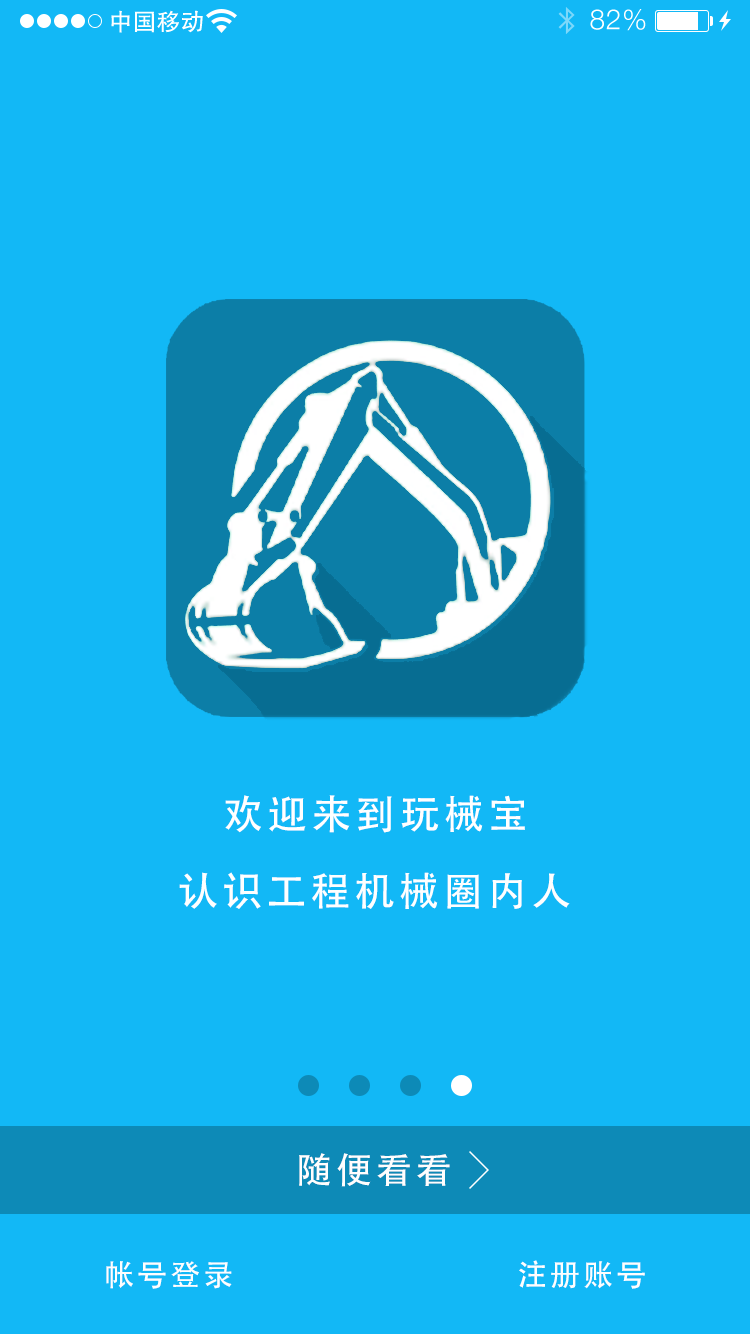
<style>
.page{position:relative;width:750px;height:1334px;background:#12b8f6}
.page>*{position:absolute;margin:0}
.t1{font:40px "AdobeHeitiStd-Regular";letter-spacing:0.104em;color:#ffffff}
.t2{font:40px "AdobeHeitiStd-Regular";letter-spacing:0.104em;color:#feffff}
.t3{font:36px "AdobeHeitiStd-Regular";letter-spacing:0.104em;color:#fefefe}
.t4{font:30px "AdobeHeitiStd-Regular";letter-spacing:0.104em;color:#fefefe}
</style>
<div class="page">
<p class="t1" style="left:225px;top:795px;width:300px;height:38px">欢迎来到玩械宝</p>
<p class="t2" style="left:179px;top:872px;width:391px;height:37px">认识工程机械圈内人</p>
<p class="t3" style="left:299px;top:1153px;width:151px;height:34px">随便看看</p>
<p class="t4" style="left:106px;top:1261px;width:126px;height:28px">帐号登录</p>
<p class="t4" style="left:519px;top:1260px;width:126px;height:29px">注册账号</p>
</div>
